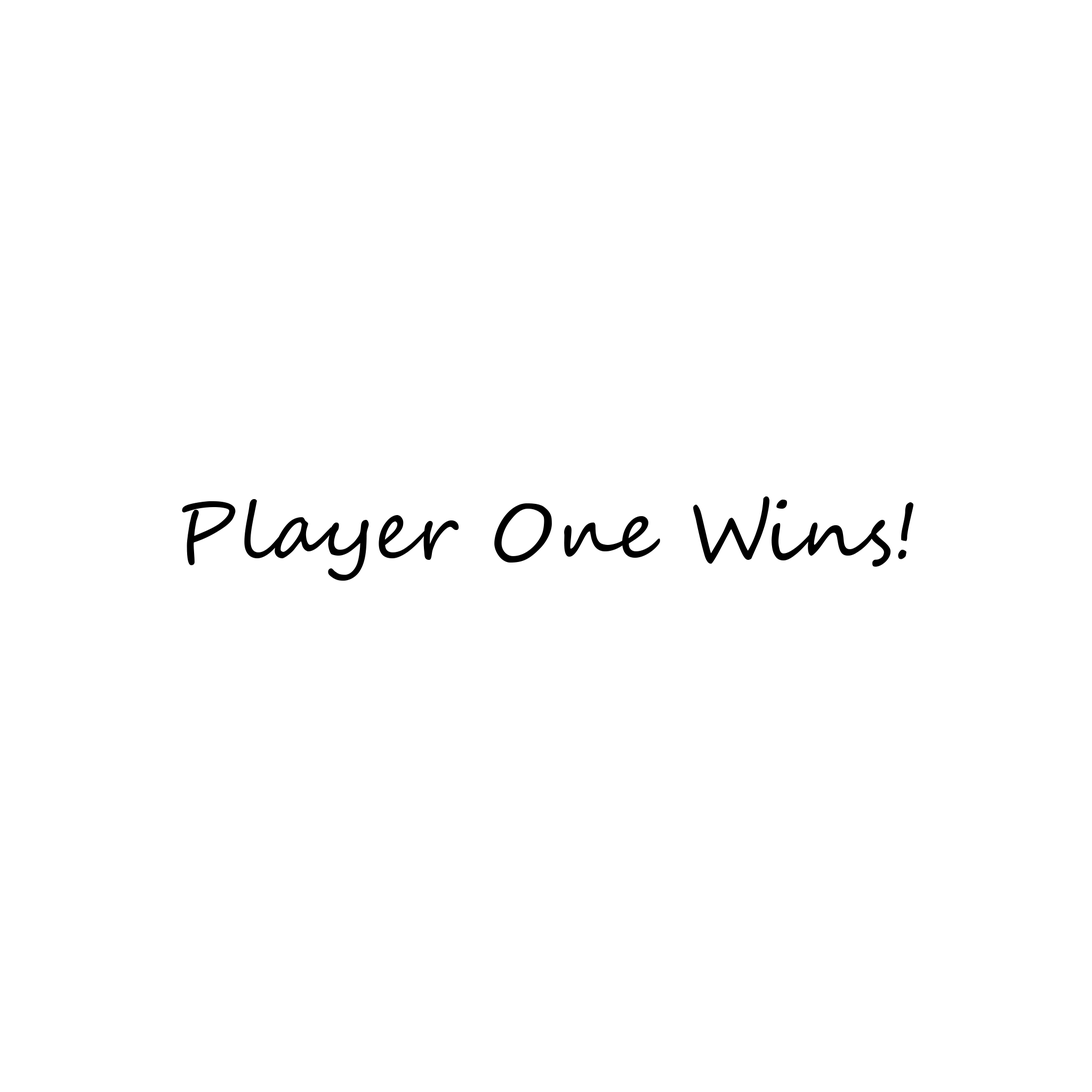
<style>
.page{position:relative;width:1092px;height:1092px;background:#ffffff}
.page>*{position:absolute;margin:0}
.t1{font:80px "SegoeScript";color:#000000}
</style>
<div class="page">
<p class="t1" style="left:182px;top:496px;width:731px;height:85px">Player One Wins!</p>
</div>
